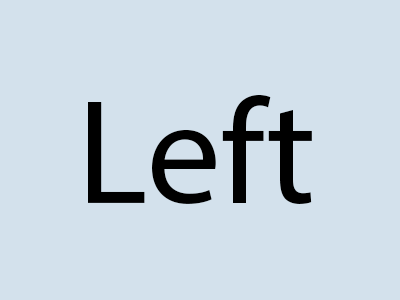
<style>
.page{position:relative;width:400px;height:300px;background:#d3e1ec}
.page>*{position:absolute;margin:0}
.t1{font:150px "MyriadHebrew-Regular";color:#000000}
</style>
<div class="page">
<p class="t1" style="left:88px;top:95px;width:224px;height:109px">Left</p>
</div>
